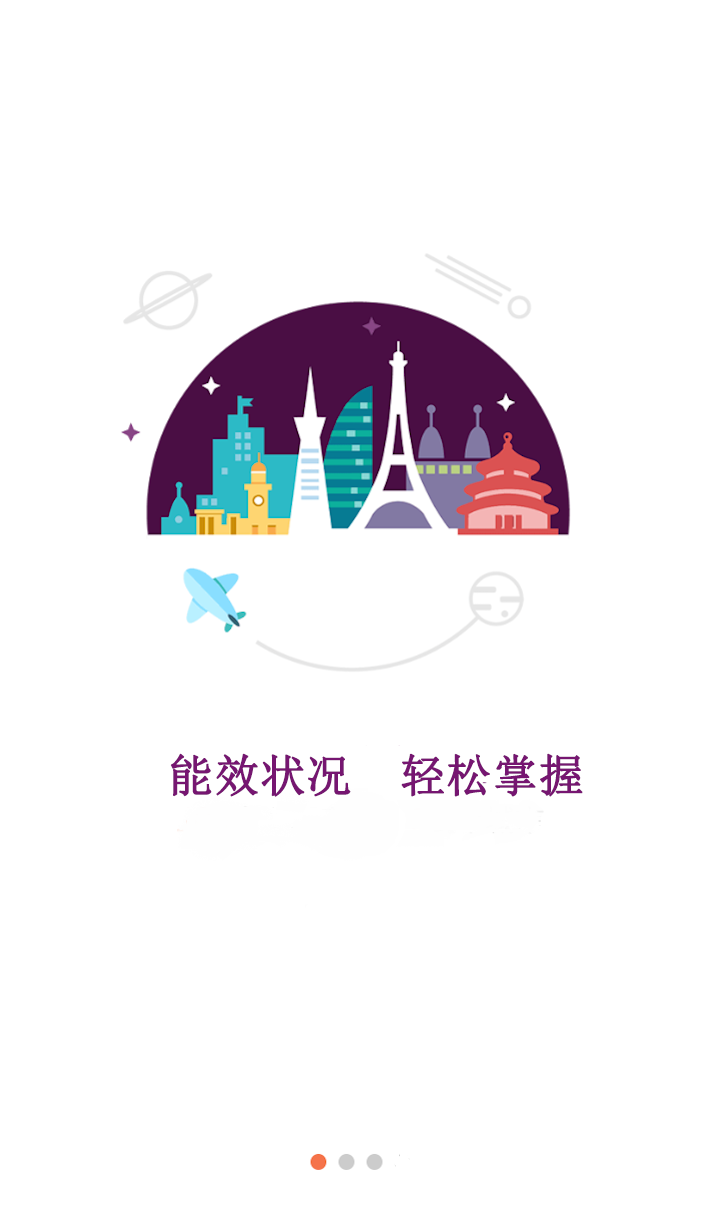
<style>
.page{position:relative;width:720px;height:1230px;background:#ffffff}
.page>*{position:absolute;margin:0}
.t1{font:45px "SimSun";color:#761671;font-weight:bold}
</style>
<div class="page">
<p class="t1" style="left:170px;top:753px;width:413px;height:44px">能效状况  轻松掌握</p>
</div>
